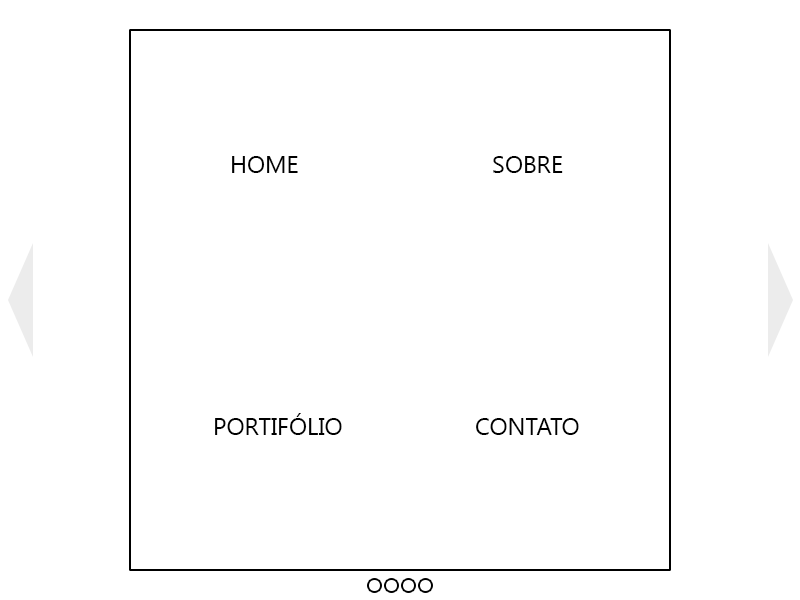
<style>
.page{position:relative;width:800px;height:600px;background:#ffffff}
.page>*{position:absolute;margin:0}
.t1{font:24px "SegoeUI";color:#000000;text-transform:uppercase}
</style>
<div class="page">
<p class="t1" style="left:232px;top:156px;width:66px;height:17px">Home</p>
<p class="t1" style="left:493px;top:156px;width:70px;height:17px">Sobre</p>
<p class="t1" style="left:215px;top:413px;width:127px;height:22px">portifólio</p>
<p class="t1" style="left:476px;top:418px;width:103px;height:17px">Contato</p>
</div>
